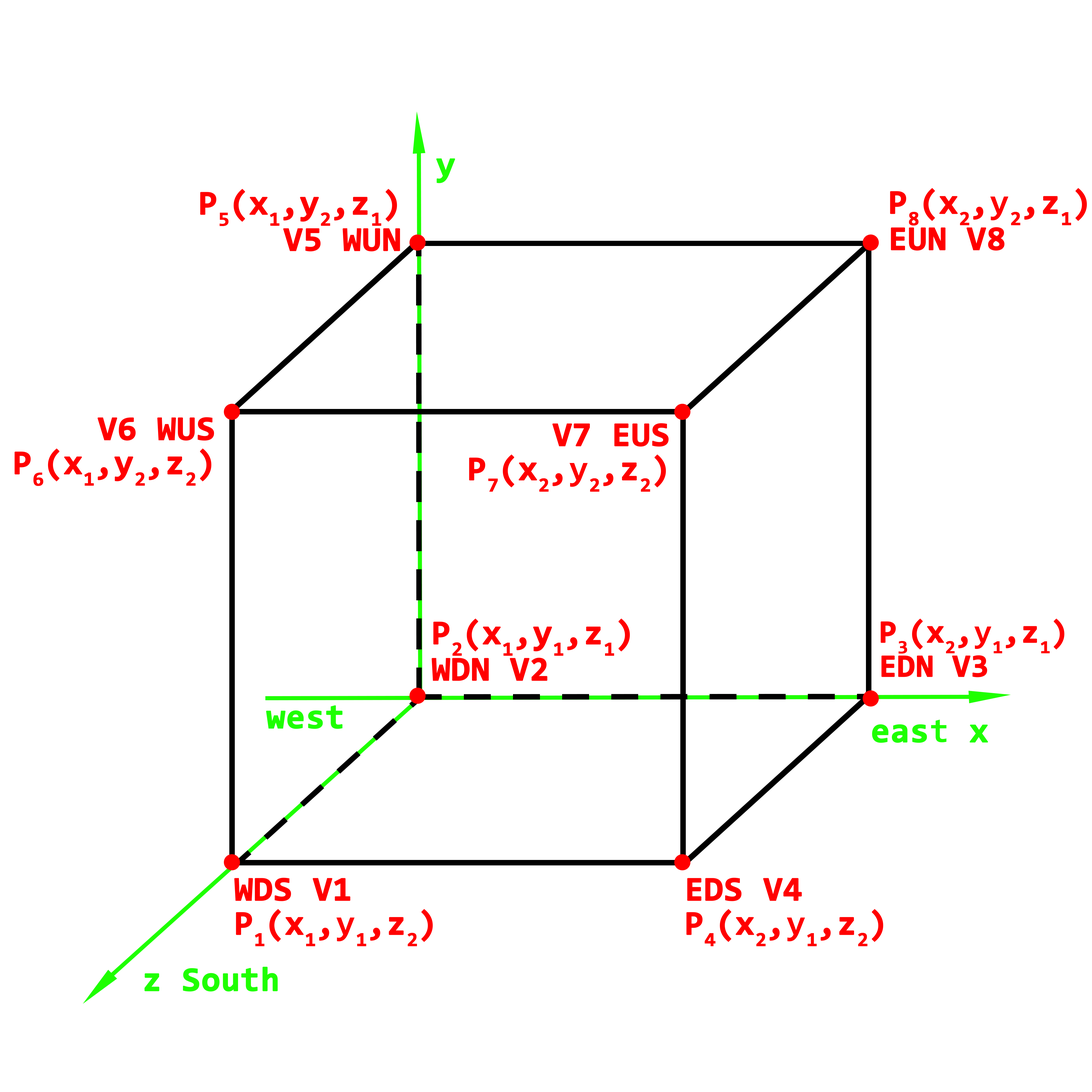
<style>
.page{position:relative;width:1092px;height:1092px;background:#ffffff}
.page>*{position:absolute;margin:0}
.t1{font:34.1px "Consolas-Bold";color:#1eff00;font-weight:bold}
.t2{font:34.1px/36.4px "Consolas-Bold";color:#ff0000;font-weight:bold}
.t3{font:34.1px/34.1px "Consolas-Bold";color:#ff0000;font-weight:bold}
.t4{font:31.8px/34.1px "Consolas-Bold";color:#ff0000;font-weight:bold}
</style>
<div class="page">
<p class="t1" style="left:436px;top:158px;width:19px;height:25px">y</p>
<p class="t2" style="left:200px;top:189px;width:200px;height:62px;text-align:right">P5(x1,y2,z1)<br>V5 WUN</p>
<p class="t2" style="left:890px;top:188px;width:197px;height:63px">P8(x2,y2,z1)<br>EUN V8</p>
<p class="t3" style="left:14px;top:417px;width:200px;height:69px;text-align:right">V6 WUS<br>P6(x1,y2,z2)</p>
<p class="t3" style="left:469px;top:423px;width:200px;height:69px;text-align:right">V7 EUS<br>P7(x2,y2,z2)</p>
<p class="t2" style="left:432px;top:618px;width:198px;height:63px">P2(x1,y1,z1)<br>WDN V2</p>
<p class="t4" style="left:881px;top:618px;width:183px;height:59px">P3(x2,y1,z1)<br>EDN V3</p>
<p class="t1" style="left:266px;top:705px;width:77px;height:24px">west</p>
<p class="t1" style="left:872px;top:720px;width:116px;height:23px">east x</p>
<p class="t3" style="left:234px;top:878px;width:199px;height:68px">WDS V1<br>P1(x1,y1,z2)</p>
<p class="t3" style="left:686px;top:878px;width:197px;height:68px">EDS V4<br>P4(x2,y1,z2)</p>
<p class="t1" style="left:144px;top:967px;width:134px;height:25px">z South</p>
</div>
